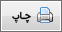
<style>
.page{position:relative;width:62px;height:32px}
.page>*{position:absolute;margin:0}
.t1{font:12px "Mj_CasablancaLight";color:#030000}
</style>
<div class="page">
<p class="t1" style="left:12px;top:11px;width:19px;height:12px">چـاپ</p>
</div>
